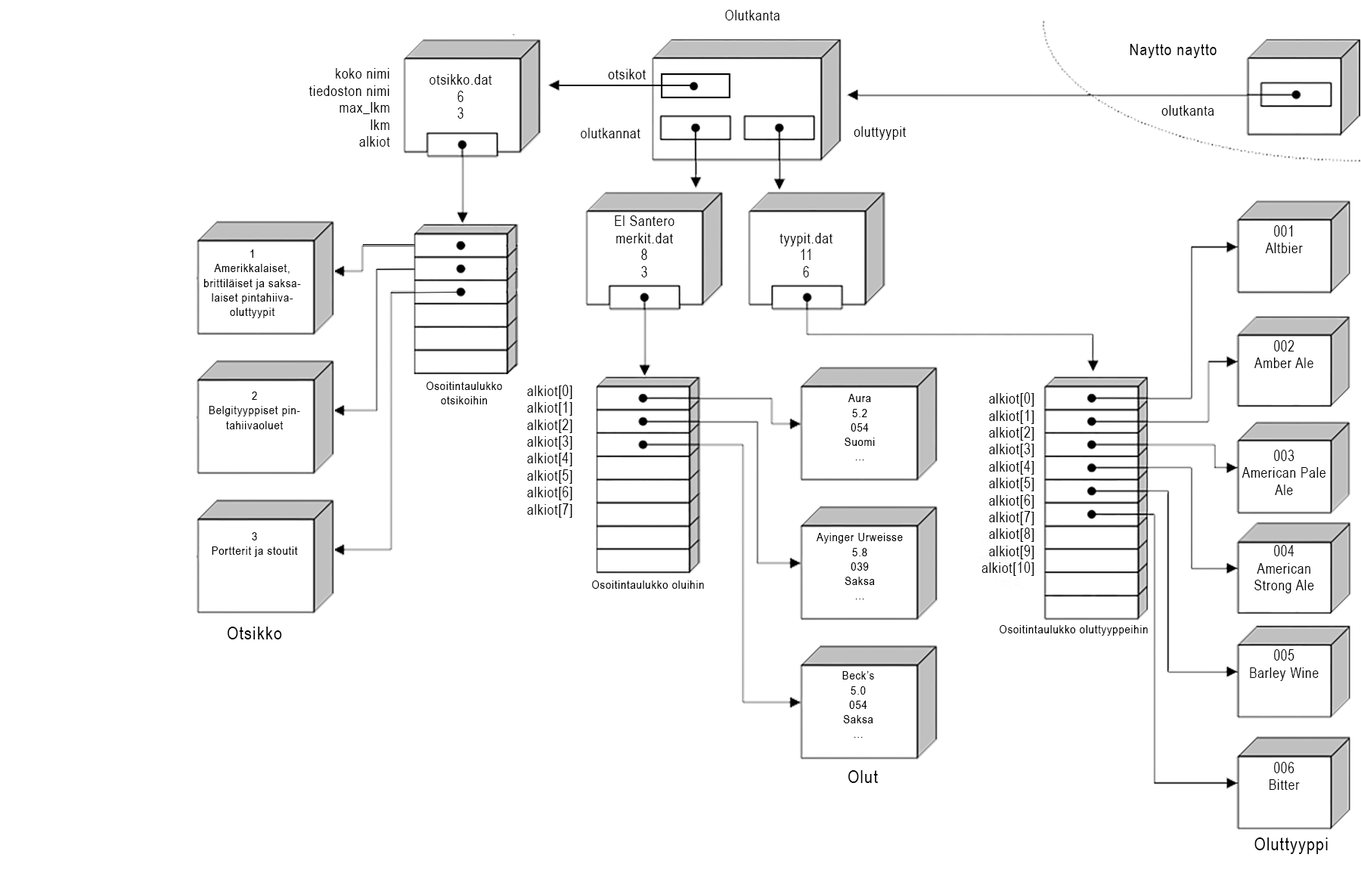
<style>
.page{position:relative;width:1361px;height:876px;background:#ffffff}
.page>*{position:absolute;margin:0}
.t1{font:14.1px "ArialNarrow";letter-spacing:0.05em;color:#000000}
.t2{font:16.1px "ArialNarrow";letter-spacing:0.05em;color:#000000}
.t3{font:12.1px "ArialNarrow";letter-spacing:0.05em;color:#000000}
.t4{font:18.1px "ArialNarrow";letter-spacing:0.05em;color:#000000}
</style>
<div class="page">
<p class="t1" style="left:725px;top:10px;width:54px;height:10px">Olutkanta</p>
<p class="t2" style="left:1130px;top:44px;width:86px;height:14px">Naytto naytto</p>
<p class="t1" style="left:308px;top:68px;width:82px;height:79px;text-align:right">koko nimi<br>tiedoston nimi<br>max_lkm<br>lkm<br>alkiot</p>
<p class="t1" style="left:429px;top:74px;width:63px;height:45px;text-align:center">otsikko.dat<br>6<br>3</p>
<p class="t1" style="left:608px;top:69px;width:38px;height:10px">otsikot</p>
<p class="t1" style="left:1161px;top:105px;width:53px;height:11px">olutkanta</p>
<p class="t1" style="left:581px;top:128px;width:59px;height:10px">olutkannat</p>
<p class="t1" style="left:854px;top:126px;width:52px;height:14px">oluttyypit</p>
<p class="t1" style="left:615px;top:215px;width:59px;height:62px;text-align:center">El Santero<br>merkit.dat<br>8<br>3</p>
<p class="t1" style="left:779px;top:233px;width:53px;height:44px;text-align:center">tyypit.dat<br>11<br>6</p>
<p class="t1" style="left:1265px;top:225px;width:38px;height:28px;text-align:center">001<br>Altbier</p>
<p class="t3" style="left:203px;top:249px;width:98px;height:69px;text-align:center">1<br>Amerikkalaiset, brittiläiset ja saksalaiset pintahiivaoluttyypit</p>
<p class="t1" style="left:1254px;top:340px;width:59px;height:28px;text-align:center">002<br>Amber Ale</p>
<p class="t3" style="left:426px;top:382px;width:76px;height:22px;text-align:center">Osoitintaulukko<br>otsikoihin</p>
<p class="t1" style="left:527px;top:385px;width:45px;height:133px;text-align:right">alkiot[0]<br>alkiot[1]<br>alkiot[2]<br>alkiot[3]<br>alkiot[4]<br>alkiot[5]<br>alkiot[6]<br>alkiot[7]</p>
<p class="t3" style="left:209px;top:392px;width:91px;height:37px;text-align:center">2<br>Belgityyppiset pintahiivaoluet</p>
<p class="t3" style="left:844px;top:394px;width:31px;height:66px;text-align:center">Aura<br>5.2<br>054<br>Suomi<br>...</p>
<p class="t1" style="left:981px;top:392px;width:53px;height:184px;text-align:right">alkiot[0]<br>alkiot[1]<br>alkiot[2]<br>alkiot[3]<br>alkiot[4]<br>alkiot[5]<br>alkiot[6]<br>alkiot[7]<br>alkiot[8]<br>alkiot[9]<br>alkiot[10]<br><br>...</p>
<p class="t1" style="left:1241px;top:450px;width:85px;height:45px;text-align:center">003<br>American Pale Ale</p>
<p class="t3" style="left:212px;top:532px;width:86px;height:25px;text-align:center">3<br>Portterit ja stoutit</p>
<p class="t3" style="left:816px;top:533px;width:87px;height:67px;text-align:center">Ayinger Urweisse<br>5.8<br>039<br>Saksa<br>...</p>
<p class="t1" style="left:1254px;top:545px;width:60px;height:48px;text-align:center">004<br>American Strong Ale</p>
<p class="t3" style="left:592px;top:581px;width:112px;height:8px">Osoitintaulukko oluihin</p>
<p class="t4" style="left:228px;top:627px;width:54px;height:13px">Otsikko</p>
<p class="t3" style="left:999px;top:625px;width:149px;height:11px">Osoitintaulukko oluttyyppeihin</p>
<p class="t1" style="left:1250px;top:649px;width:69px;height:32px;text-align:center">005<br>Barley Wine</p>
<p class="t3" style="left:842px;top:671px;width:32px;height:67px;text-align:center">Beck’s<br>5.0<br>054<br>Saksa<br>...</p>
<p class="t4" style="left:848px;top:770px;width:30px;height:13px">Olut</p>
<p class="t1" style="left:1269px;top:762px;width:31px;height:28px;text-align:center">006<br>Bitter</p>
<p class="t4" style="left:1254px;top:838px;width:74px;height:16px">Oluttyyppi</p>
</div>
